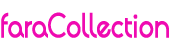
<style>
.page{position:relative;width:170px;height:50px;background:#ffffff}
.page>*{position:absolute;margin:0}
.t1{font:33.2px "Quadranta-Bold";color:#ef0ab1;scale:0.82 1}
</style>
<div class="page">
<p class="t1" style="left:1px;top:12px;width:168px;height:26px">faraCollection</p>
</div>
